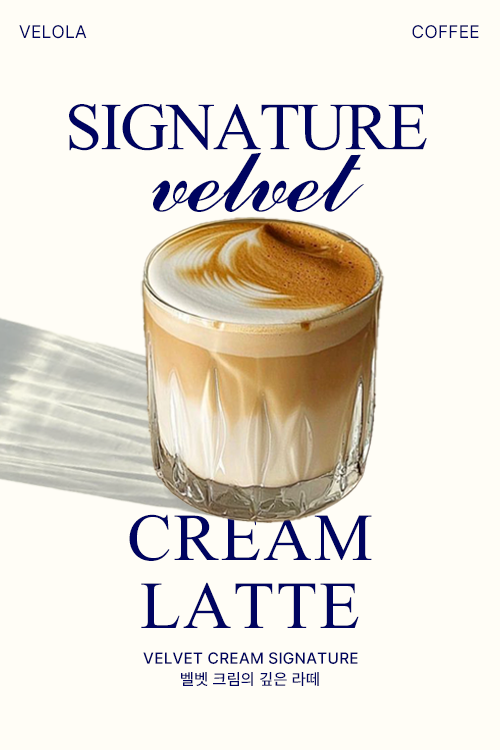
<style>
.page{position:relative;width:500px;height:750px;background:#fffdf6}
.page>*{position:absolute;margin:0}
.t1{font:18px "Pretendard-Regular";letter-spacing:0.02em;color:#000460}
.t2{font:100px/53px "Microsoft-Himalaya";letter-spacing:-0.02em;color:#000460}
.t3{font:100px/53px "CommercialScriptBT-Regular";letter-spacing:-0.02em;color:#000460}
.t4{font:100px/68px "Microsoft-Himalaya";letter-spacing:0.02em;color:#000460}
.t5{font:16px "Pretendard-Medium";letter-spacing:0.02em;color:#000460}
</style>
<div class="page">
<p class="t1" style="left:19px;top:25px;width:68px;height:14px">VELOLA</p>
<p class="t1" style="left:412px;top:25px;width:67px;height:14px">COFFEE</p>
<p class="t2" style="left:69px;top:104px;width:358px;height:108px;text-align:center">SIGNATURE<br><span class="t3">velvet</span></p>
<p class="t4" style="left:129px;top:514px;width:243px;height:114px;text-align:center">CREAM<br>LATTE</p>
<p class="t5" style="left:143px;top:652px;width:215px;height:12px">VELVET CREAM SIGNATURE</p>
<p class="t5" style="left:181px;top:672px;width:138px;height:14px">벨벳 크림의 깊은 라떼</p>
</div>
